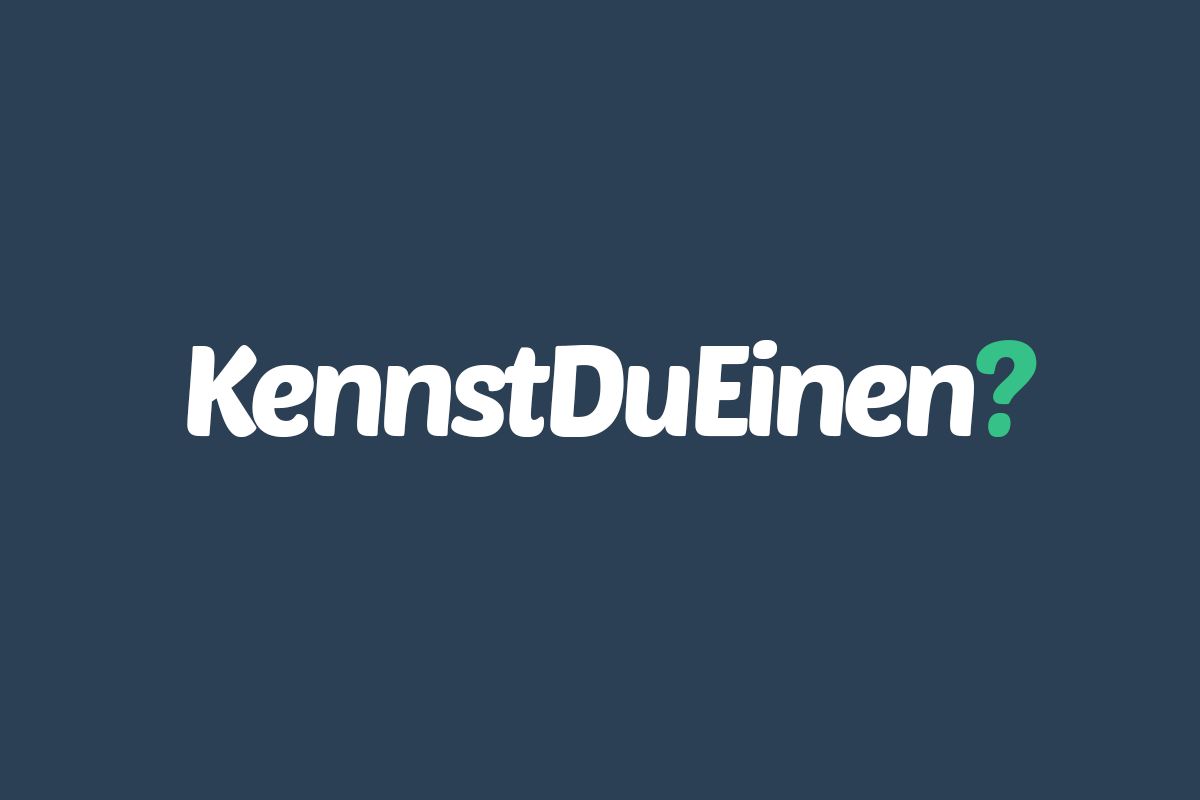
<style>
.page{position:relative;width:1200px;height:800px;background:#2c4055}
.page>*{position:absolute;margin:0}
.t1{font:126px "PoetsenOne-Regular";letter-spacing:-0.06em;color:#ffffff}
.t2{font:126px "PoetsenOne-Regular";letter-spacing:-0.06em;color:#868686}
.t3{font:126px "PoetsenOne-Regular";letter-spacing:-0.06em;color:#35c187}
</style>
<div class="page">
<p class="t1" style="left:187px;top:340px;width:850px;height:97px">KennstDuEinen<span class="t2">?</span></p>
<p class="t1" style="left:187px;top:340px;width:850px;height:97px">KennstDuEinen?</p>
<p class="t1" style="left:187px;top:340px;width:850px;height:97px">KennstDuEinen<span class="t3">?</span></p>
</div>
